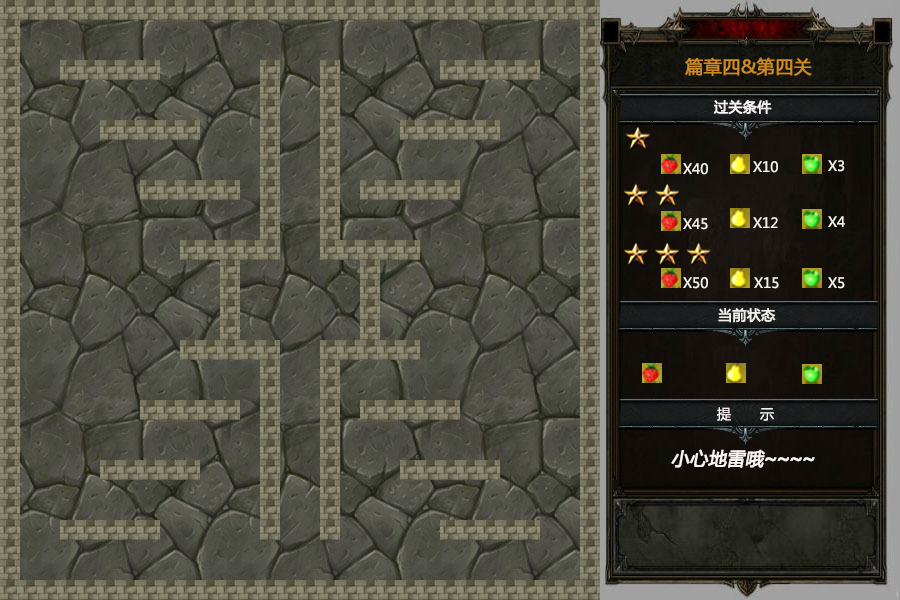
<style>
.page{position:relative;width:900px;height:600px}
.page>*{position:absolute;margin:0}
.t1{font:18px "MicrosoftYaHei";color:#cf8b20;font-weight:bold}
.t2{font:14px "MicrosoftYaHei";color:#f9f3f3;font-weight:bold}
.t3{font:14px "MicrosoftYaHei";color:#f1f0e9}
.t4{font:14px "MicrosoftYaHei";color:#f1f0e9;font-weight:bold}
.t5{font:14px "MicrosoftYaHei";color:#f9f3f3}
.t6{font:18px "MicrosoftYaHei";color:#f9f3f3;font-weight:bold;font-style:italic}
.t7{font:18px "AdobeHeitiStd-Regular";color:#f9f3f3;font-weight:bold;font-style:italic}
</style>
<div class="page">
<p class="t1" style="left:685px;top:57px;width:127px;height:19px">篇章四&amp;第四关</p>
<p class="t2" style="left:714px;top:100px;width:58px;height:15px">过关条件</p>
<p class="t3" style="left:753px;top:161px;width:25px;height:12px">X10</p>
<p class="t3" style="left:828px;top:160px;width:17px;height:12px">X3</p>
<p class="t3" style="left:683px;top:163px;width:25px;height:12px">X40</p>
<p class="t3" style="left:683px;top:218px;width:25px;height:12px">X45</p>
<p class="t3" style="left:753px;top:217px;width:25px;height:11px">X12</p>
<p class="t3" style="left:828px;top:216px;width:17px;height:11px">X4</p>
<p class="t3" style="left:683px;top:277px;width:25px;height:12px">X50</p>
<p class="t3" style="left:754px;top:277px;width:25px;height:12px">X15</p>
<p class="t3" style="left:828px;top:277px;width:17px;height:12px">X5</p>
<p class="t4" style="left:718px;top:308px;width:58px;height:15px">当前状态</p>
<p class="t5" style="left:717px;top:407px;width:57px;height:14px">提       示</p>
<p class="t6" style="left:671px;top:449px;width:144px;height:19px">小心地雷哦<span class="t7">~~~~</span></p>
</div>
